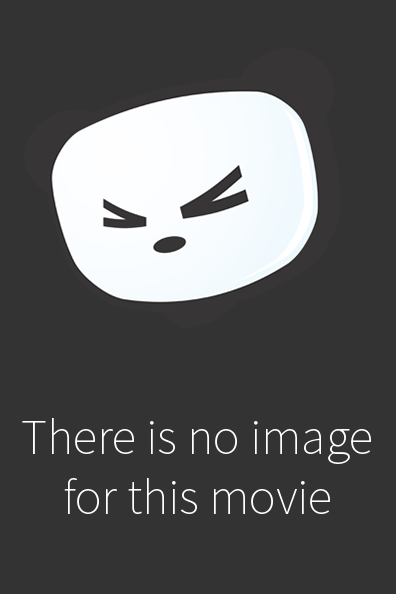
<style>
.page{position:relative;width:396px;height:594px;background:#333333}
.page>*{position:absolute;margin:0}
.t1{font:50px "SourceSansPro-ExtraLight";color:#ffffff}
</style>
<div class="page">
<p class="t1" style="left:22px;top:418px;width:349px;height:96px;text-align:center">There is no image<br>for this movie</p>
</div>
